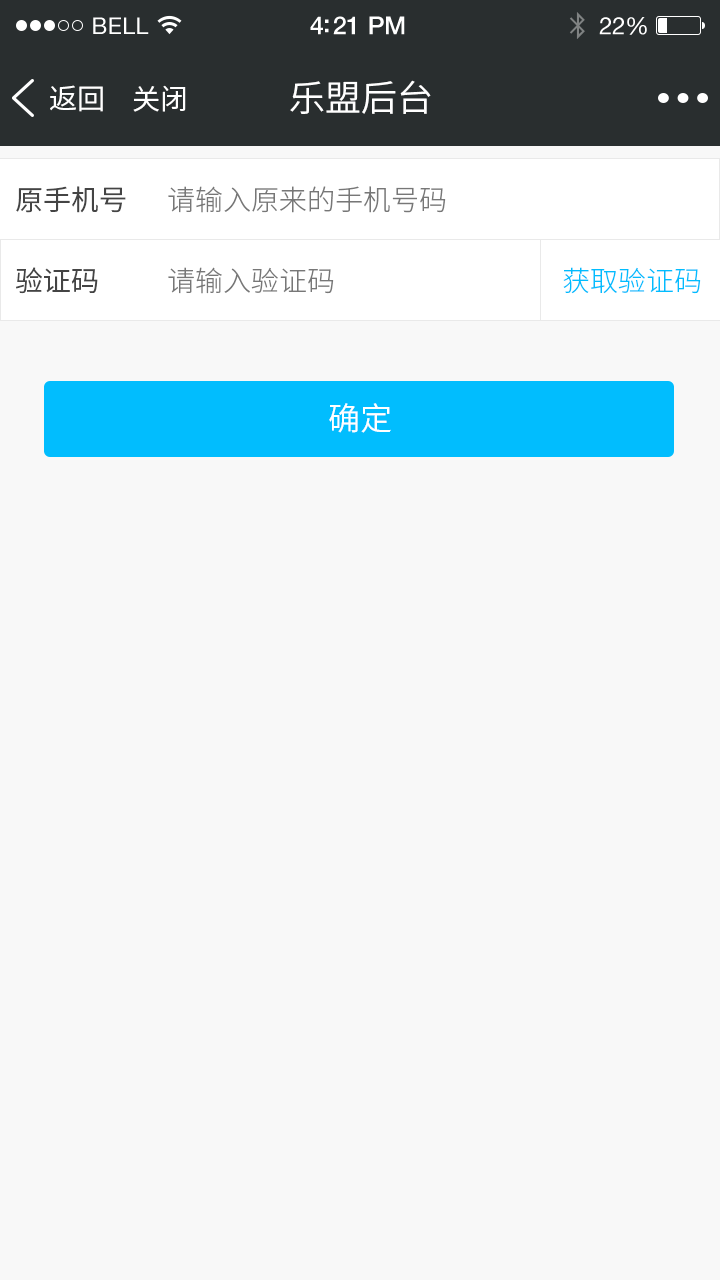
<style>
.page{position:relative;width:720px;height:1280px;background:#f8f8f8}
.page>*{position:absolute;margin:0}
.t1{font:28px "SourceHanSansCN-Normal";color:#ffffff}
.t2{font:36px "SourceHanSansCN-Normal";color:#ffffff}
.t3{font:28px "SourceHanSansCN-Normal";color:#444444}
.t4{font:28px "SourceHanSansCN-Light";color:#777777}
.t5{font:28px "SourceHanSansCN-Light";color:#01bdfe}
.t6{font:32px "SourceHanSansCN-Normal";color:#ffffff}
</style>
<div class="page">
<p class="t1" style="left:50px;top:85px;width:53px;height:27px">返回</p>
<p class="t1" style="left:133px;top:85px;width:53px;height:27px">关闭</p>
<p class="t2" style="left:290px;top:80px;width:141px;height:34px">乐盟后台</p>
<p class="t3" style="left:16px;top:186px;width:110px;height:27px">原手机号</p>
<p class="t4" style="left:168px;top:186px;width:278px;height:27px">请输入原来的手机号码</p>
<p class="t3" style="left:16px;top:267px;width:82px;height:27px">验证码</p>
<p class="t4" style="left:168px;top:267px;width:166px;height:27px">请输入验证码</p>
<p class="t5" style="left:563px;top:267px;width:138px;height:27px">获取验证码</p>
<p class="t6" style="left:329px;top:403px;width:62px;height:30px">确定</p>
</div>
